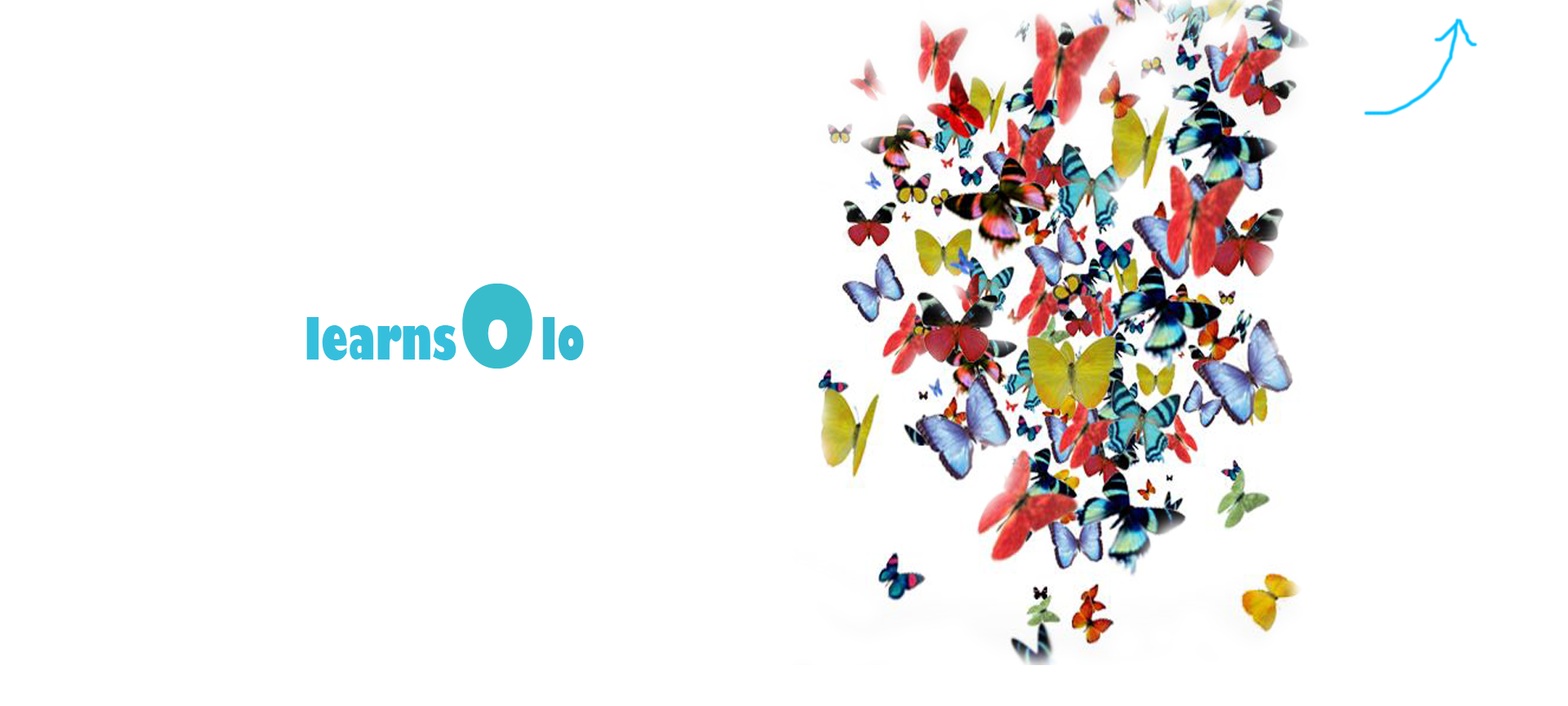
<style>
.page{position:relative;width:1568px;height:706px;background:#ffffff}
.page>*{position:absolute;margin:0}
.t1{font:106.2px "ShowcardGothic-Reg";color:#38bccc}
.t2{font:57.2px "GillSans-UltraBoldCondensed";color:#36bfdc}
.t3{font:57.2px "GillSans-UltraBoldCondensed";color:#36b9d1}
</style>
<div class="page">
<p class="t1" style="left:462px;top:283px;width:70px;height:85px">o</p>
<p class="t2" style="left:306px;top:317px;width:151px;height:43px">learns</p>
<p class="t3" style="left:542px;top:317px;width:42px;height:43px">lo</p>
</div>
